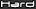
<style>
.page{position:relative;width:36px;height:9px;background:#333333}
.page>*{position:absolute;margin:0}
.t1{font:10px "ThundergodII";color:#ffffff}
</style>
<div class="page">
<p class="t1" style="left:1px;top:1px;width:34px;height:7px">Hard</p>
</div>
